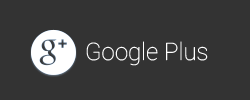
<style>
.page{position:relative;width:250px;height:100px;background:#333333}
.page>*{position:absolute;margin:0}
.t1{font:24px "Roboto-Thin";color:#ffffff}
</style>
<div class="page">
<p class="t1" style="left:86px;top:41px;width:122px;height:25px">Google Plus</p>
</div>
